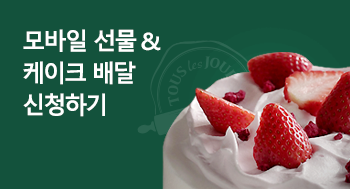
<style>
.page{position:relative;width:350px;height:189px;background:#13523c}
.page>*{position:absolute;margin:0}
.t1{font:24px/32px "MalgunGothicBold";letter-spacing:-0.04em;color:#ffffff}
</style>
<div class="page">
<p class="t1" style="left:23px;top:29px;width:138px;height:88px">모바일 선물 &amp;<br>케이크 배달 <br>신청하기</p>
</div>
